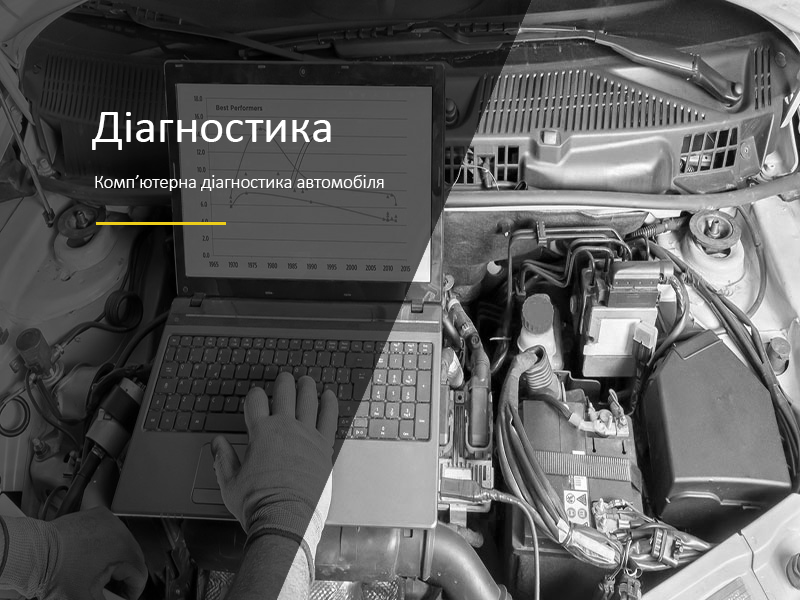
<style>
.page{position:relative;width:800px;height:600px}
.page>*{position:absolute;margin:0}
.t1{font:48px "Calibri";color:#ffffff}
.t2{font:18.7px "Calibri-Light";color:#ffffff}
</style>
<div class="page">
<p class="t1" style="left:92px;top:112px;width:239px;height:38px">Діагностика</p>
<p class="t2" style="left:95px;top:175px;width:289px;height:16px">Комп’ютерна діагностика автомобіля</p>
</div>
